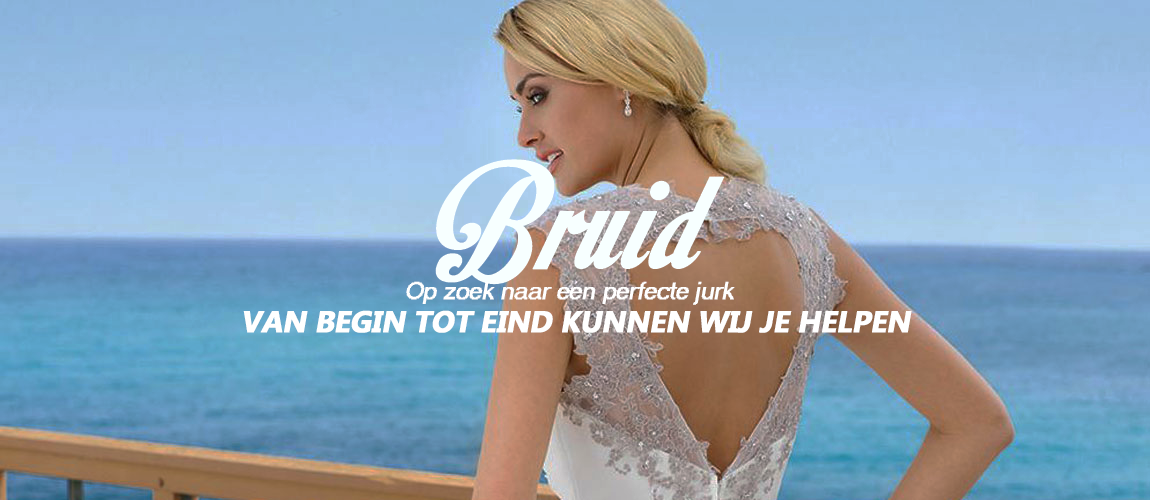
<style>
.page{position:relative;width:1150px;height:500px}
.page>*{position:absolute;margin:0}
.t1{font:24px "MS Sans Serif";color:#ffffff;font-weight:bold;font-style:italic}
.t2{font:30px "MicrosoftTaiLe-Bold";letter-spacing:-0.025em;color:#ffffff;text-transform:uppercase;font-weight:bold;font-style:italic}
</style>
<div class="page">
<p class="t1" style="left:406px;top:281px;width:329px;height:24px">Op zoek naar een perfecte jurk</p>
<p class="t2" style="left:243px;top:310px;width:669px;height:23px">van begin tot eind kunnen wij je helpen</p>
</div>
